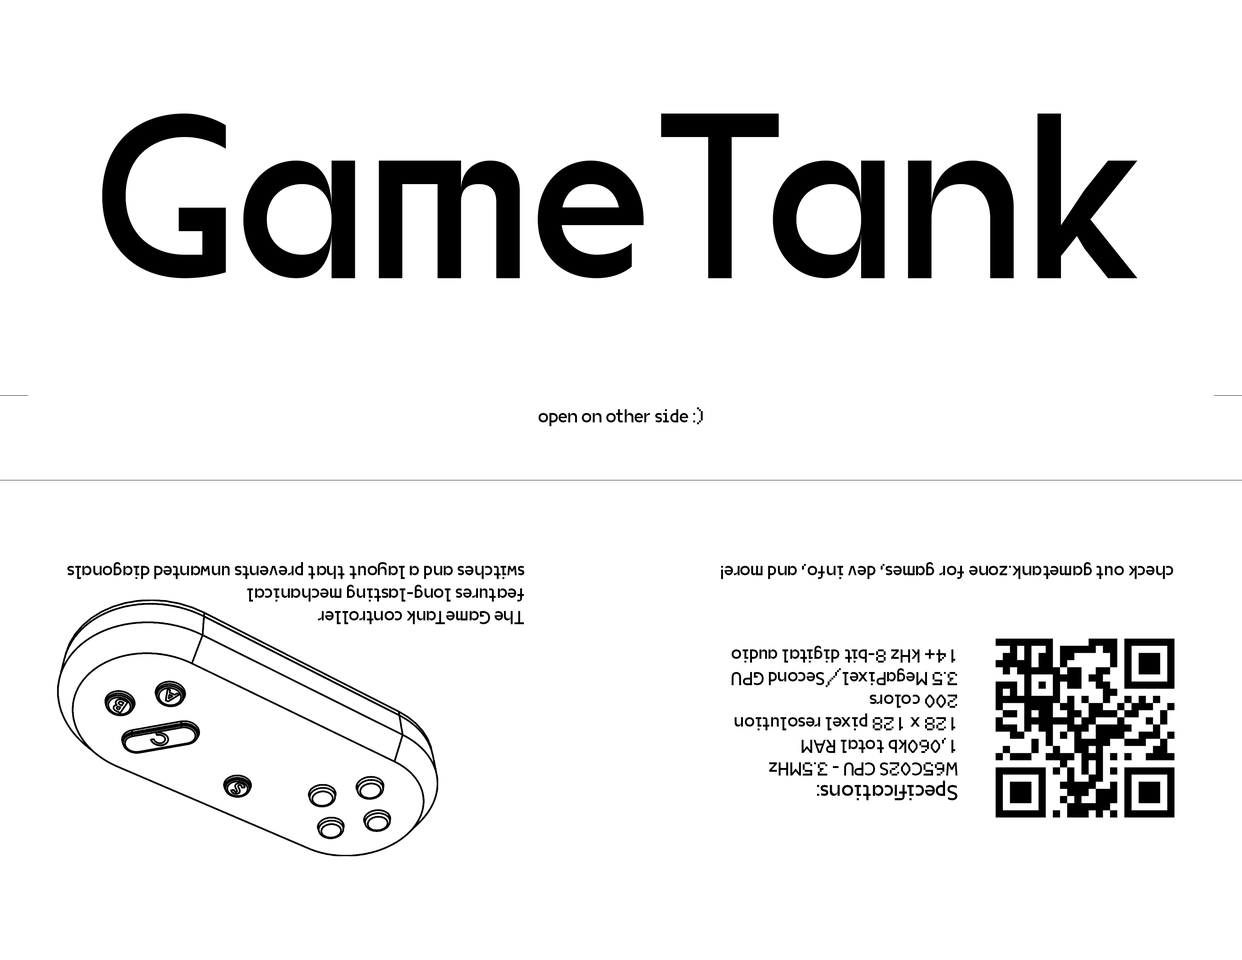
<style>
.page{position:relative;width:1242px;height:960px;background:#ffffff}
.page>*{position:absolute;margin:0}
.t1{font:235.3px "VG5000-Regular";color:#000000}
.t2{font:18.8px "VG5000-Regular";color:#000000}
.t3{font:22px "VG5000-Regular";color:#000000}
</style>
<div class="page">
<p class="t1" style="left:102px;top:113px;width:1036px;height:165px">GameTank</p>
<p class="t2" style="left:539px;top:407px;width:164px;height:19px">open on other side :)</p>
<p class="t2" style="left:67px;top:562px;width:457px;height:62px;rotate:180deg">The GameTank controller<br>features long-lasting mechanical<br>switches and a layout that prevents unwanted diagonals</p>
<p class="t2" style="left:721px;top:562px;width:452px;height:17px;rotate:180deg">check out gametank.zone for games, dev info, and more!</p>
<p class="t2" style="left:732px;top:646px;width:226px;height:154px;rotate:180deg"><span class="t3">Specifications:<br></span>W65C02S CPU - 3.5MHz<br>1,060kb total RAM<br>128 x 128 pixel resolution<br>200 colors<br>3.5 MegaPixel/Second GPU<br>14+ kHz 8-bit digital audio</p>
</div>
